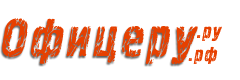
<style>
.page{position:relative;width:240px;height:80px;background:#ffffff}
.page>*{position:absolute;margin:0}
.t1{font:52.9px "Pollock3C";letter-spacing:0.06em;color:#e64000;font-style:italic}
.t2{font:20px "Pollock3C";letter-spacing:0.06em;color:#e64000;font-style:italic}
</style>
<div class="page">
<p class="t1" style="left:2px;top:18px;width:196px;height:46px">Офицеру</p>
<p class="t2" style="left:197px;top:26px;width:25px;height:16px">.ру</p>
<p class="t2" style="left:188px;top:46px;width:30px;height:18px">.рф</p>
</div>
